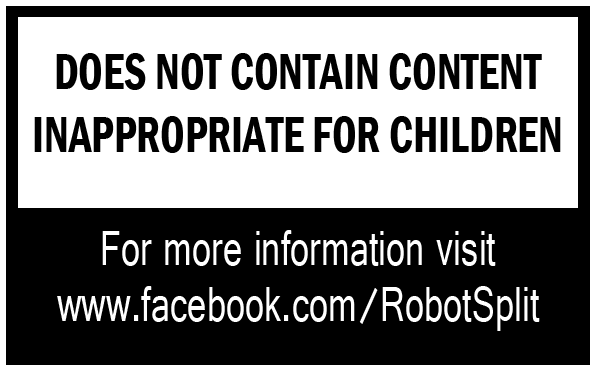
<style>
.page{position:relative;width:597px;height:371px;background:#ffffff}
.page>*{position:absolute;margin:0}
.t1{font:52px "FranklinGothic-DemiCond";color:#000000;text-transform:uppercase;scale:0.85 1}
.t2{font:52.3px "Gautami";color:#ffffff;scale:0.71 1}
</style>
<div class="page">
<p class="t1" style="left:56px;top:53px;width:486px;height:37px">Does not CONTAIN CONTENT</p>
<p class="t1" style="left:34px;top:116px;width:527px;height:37px">Inappropriate for children</p>
<p class="t2" style="left:102px;top:230px;width:394px;height:36px">For more information visit</p>
<p class="t2" style="left:57px;top:286px;width:483px;height:45px">www.facebook.com/RobotSplit</p>
</div>
